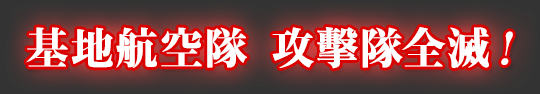
<style>
.page{position:relative;width:540px;height:94px}
.page>*{position:absolute;margin:0}
.t1{font:43px "KochoStd-Heavy";letter-spacing:0.005em;color:#ffffff;font-weight:bold}
.t2{font:43px "RyuminPro-Heavy";letter-spacing:0.005em;color:#ffffff;font-weight:bold}
.t3{font:43px "KochoStd-Heavy";letter-spacing:0.005em;color:#ffffff;font-weight:bold;font-style:italic}
</style>
<div class="page">
<p class="t1" style="left:26px;top:27px;width:487px;height:42px">基地航空隊 攻<span class="t2">擊</span>隊全滅<span class="t3">！</span></p>
</div>
